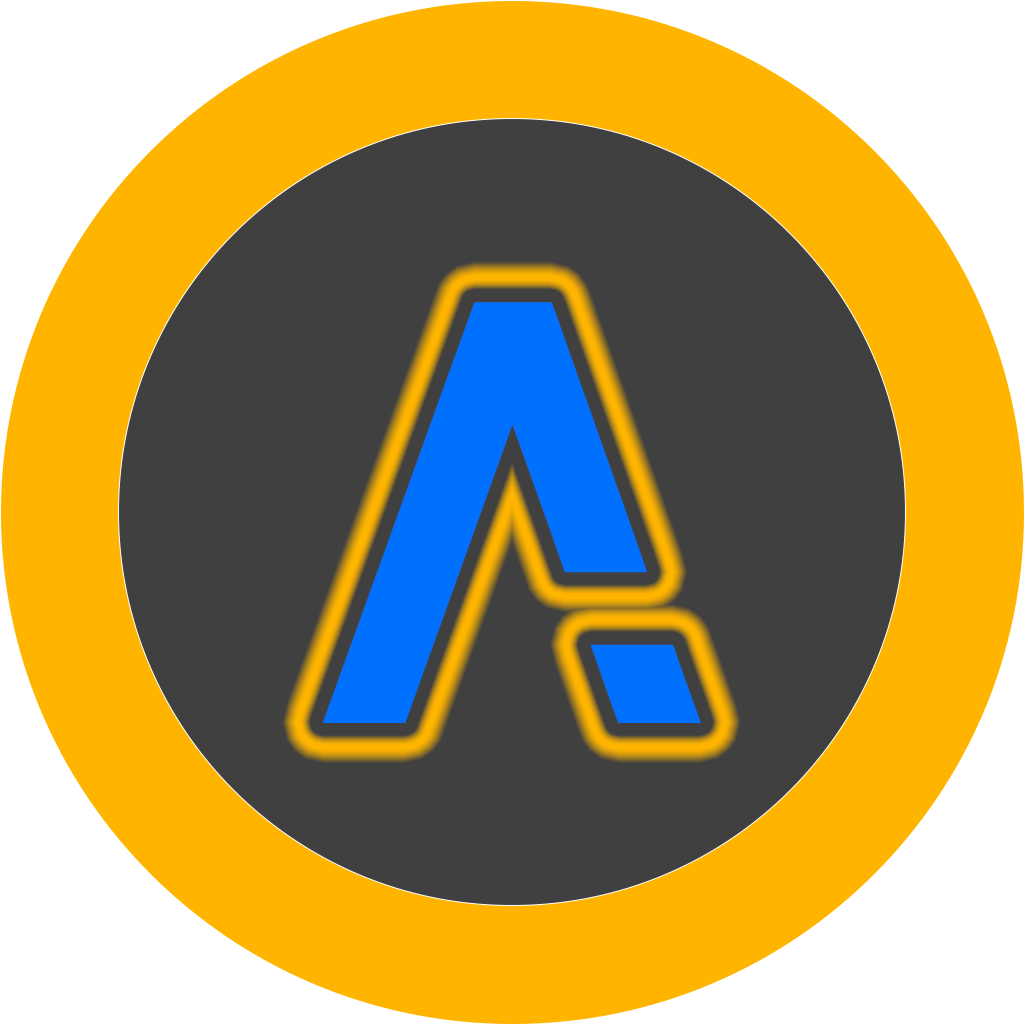
<style>
.page{position:relative;width:1024px;height:1024px;background:#404040}
.page>*{position:absolute;margin:0}
.t1{font:600px "ProcrastinatingPixie";color:#0070ff}
</style>
<div class="page">
<p class="t1" style="left:323px;top:302px;width:378px;height:421px">A</p>
</div>
